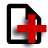
<style>
.page{position:relative;width:48px;height:48px;background:#ffffff}
.page>*{position:absolute;margin:0}
.t1{font:60px "CenturyGothic-Bold";letter-spacing:0.03em;color:#ce0000}
</style>
<div class="page">
<p class="t1" style="left:17px;top:14px;width:30px;height:29px">+</p>
</div>
